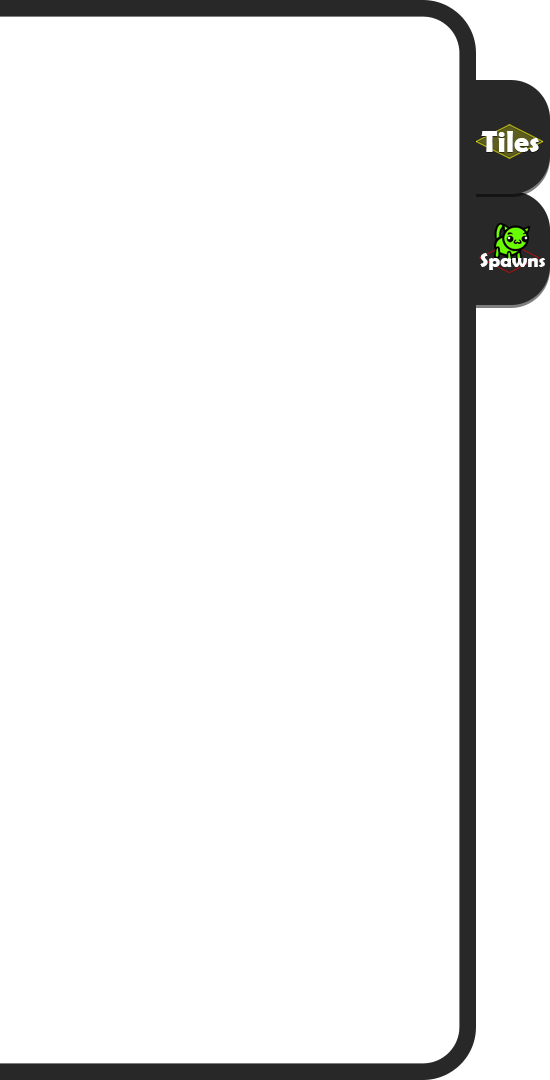
<style>
.page{position:relative;width:550px;height:1080px;background:#ffffff}
.page>*{position:absolute;margin:0}
.t1{font:30px "BerlinSansFBDemi-Bold";color:#ffffff}
.t2{font:20px "BerlinSansFBDemi-Bold";color:#ffffff}
</style>
<div class="page">
<p class="t1" style="left:481px;top:131px;width:58px;height:21px">Tiles</p>
<p class="t2" style="left:480px;top:253px;width:65px;height:17px">Spawns</p>
</div>
